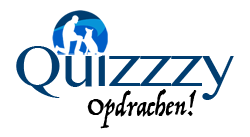
<style>
.page{position:relative;width:250px;height:137px;background:#ffffff}
.page>*{position:absolute;margin:0}
.t1{font:61.4px "TeluguMN";color:#003d70}
.t2{font:28.3px "Trattatello";color:#000000}
</style>
<div class="page">
<p class="t1" style="left:16px;top:41px;width:218px;height:59px">Quizzzy</p>
<p class="t2" style="left:87px;top:89px;width:110px;height:40px">Opdrachen!</p>
</div>
